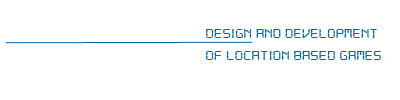
<style>
.page{position:relative;width:400px;height:100px;background:#ffffff}
.page>*{position:absolute;margin:0}
.t1{font:14.4px "DS-Digital";letter-spacing:-0.02em;color:#0067a5;scale:1.25 1}
</style>
<div class="page">
<p class="t1" style="left:206px;top:29px;width:175px;height:31px">design and development<br>  of location based games</p>
</div>
